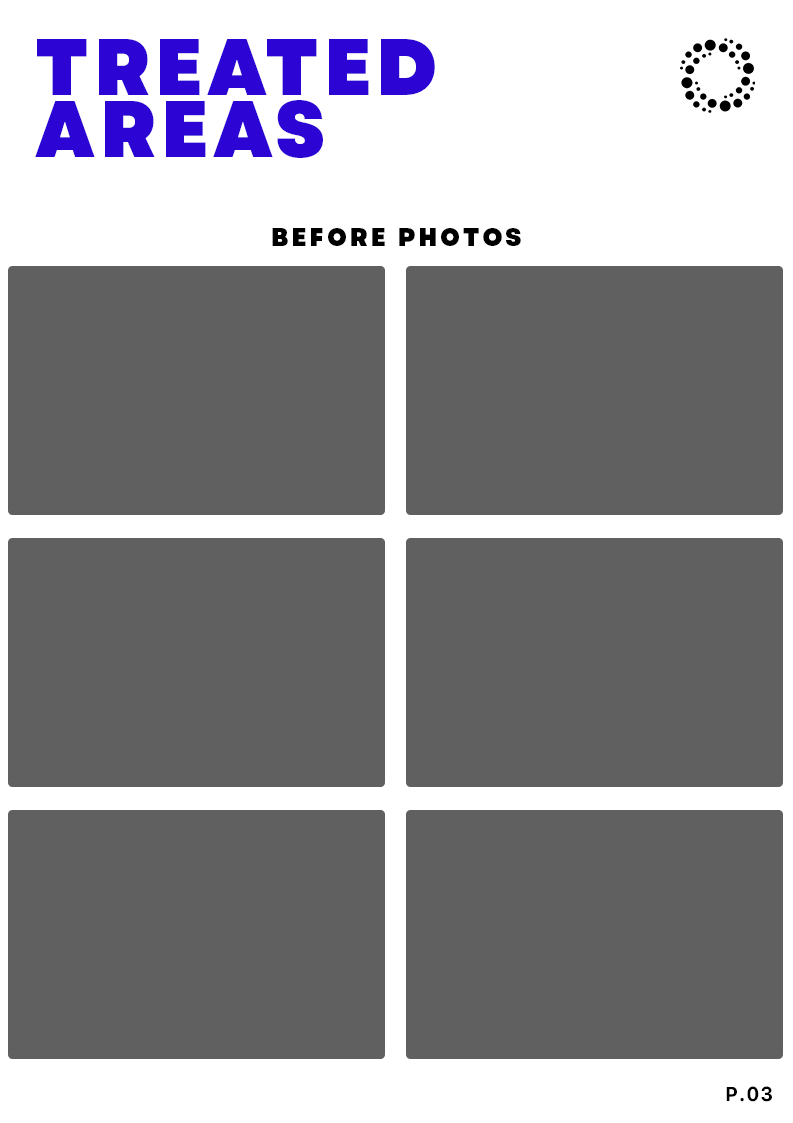
<style>
.page{position:relative;width:793px;height:1123px;background:#606060}
.page>*{position:absolute;margin:0}
.t1{font:80px/62px "Garet-Heavy";letter-spacing:0.06em;color:#2c05d4;text-transform:uppercase;scale:0.96 1}
.t2{font:25px "Garet-Heavy";letter-spacing:0.14em;color:#000000;text-transform:uppercase;scale:0.96 1}
.t3{font:20px "Galvji-Bold";letter-spacing:0.04em;color:#000000;scale:0.96 1}
</style>
<div class="page">
<p class="t1" style="left:35px;top:39px;width:400px;height:119px">treated<br>areas</p>
<p class="t2" style="left:272px;top:228px;width:249px;height:18px">before photos</p>
<p class="t3" style="left:726px;top:1086px;width:46px;height:16px">P.03</p>
</div>
